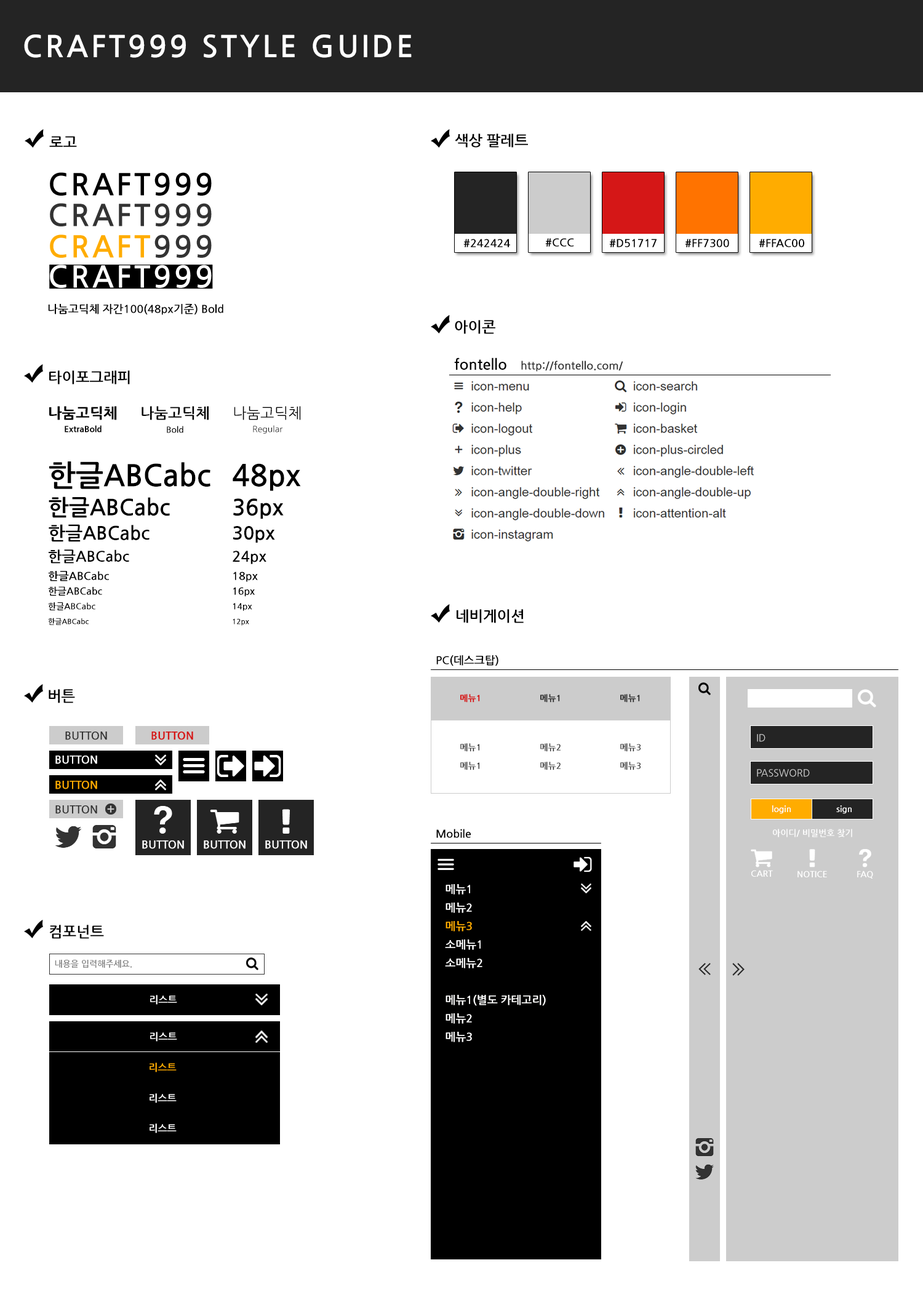
<style>
.page{position:relative;width:923px;height:1292px;background:#ffffff}
.page>*{position:absolute;margin:0}
.t1{font:29.5px "NanumGothicBold";letter-spacing:0.1em;color:#ffffff}
.t2{font:14.8px "NanumGothicBold";color:#000000}
.t3{font:11.1px "NanumGothicBold";color:#000000}
.t4{font:11.1px "NanumGothicBold";color:#333333}
.t5{font:14.8px "NanumGothicExtraBold";color:#000000}
.t6{font:14.8px "NanumGothic";color:#000000}
.t7{font:8.6px "NanumGothicExtraBold";color:#000000}
.t8{font:8.6px "NanumGothicBold";color:#000000}
.t9{font:8.6px "NanumGothic";color:#000000}
.t10{font:29.5px/29.5px "NanumGothicBold";color:#000000}
.t11{font:22.1px/29.5px "NanumGothicBold";color:#000000}
.t12{font:18.5px/24.6px "NanumGothicBold";color:#000000}
.t13{font:14.8px/22.1px "NanumGothicBold";color:#000000}
.t14{font:11.1px/18.5px "NanumGothicBold";color:#000000}
.t15{font:9.8px/14.8px "NanumGothicBold";color:#000000}
.t16{font:8.6px/14.8px "NanumGothicBold";color:#000000}
.t17{font:7.4px/14.8px "NanumGothicBold";color:#000000}
.t18{font:8.6px "NanumGothicExtraBold";color:#d51717}
.t19{font:8.6px "NanumGothicExtraBold";color:#333333}
.t20{font:11.1px "NanumGothicExtraBold";color:#d51717}
.t21{font:9.8px "NanumGothic";color:#cccccc}
.t22{font:8.6px "NanumGothicBold";color:#333333}
.t23{font:11.1px "NanumGothicBold";color:#fefefe}
.t24{font:11.1px "NanumGothicBold";color:#ffac00}
.t25{font:8.6px "NanumGothicBold";color:#fefefe}
.t26{font:11.1px "NanumGothicBold";color:#ffffff}
.t27{font:8.6px "NanumGothicBold";color:#ffffff}
.t28{font:8.6px "NanumGothicBold";color:#828282}
.t29{font:9.8px "NanumGothicBold";color:#ffffff}
.t30{font:11.1px "NanumGothicBold";color:#fffffe}
.t31{font:9.8px "NanumGothicBold";color:#ffac00}
</style>
<div class="page">
<p class="t1" style="left:24px;top:34px;width:388px;height:24px">CRAFT999 STYLE GUIDE</p>
<p class="t2" style="left:49px;top:136px;width:28px;height:11px">로고</p>
<p class="t2" style="left:455px;top:134px;width:73px;height:14px">색상 팔레트</p>
<p class="t3" style="left:463px;top:239px;width:47px;height:8px">#242424</p>
<p class="t3" style="left:545px;top:238px;width:29px;height:9px">#CCC</p>
<p class="t3" style="left:609px;top:239px;width:47px;height:8px">#D51717</p>
<p class="t3" style="left:685px;top:239px;width:44px;height:8px">#FF7300</p>
<p class="t3" style="left:759px;top:239px;width:45px;height:8px">#FFAC00</p>
<p class="t3" style="left:48px;top:304px;width:175px;height:11px">나눔고딕체 자간100(48px기준) Bold</p>
<p class="t2" style="left:455px;top:320px;width:40px;height:14px">아이콘</p>
<p class="t4" style="left:454px;top:357px;width:169px;height:15px"><span class="t2">fontello </span>http://fontello.com/</p>
<p class="t2" style="left:49px;top:370px;width:81px;height:15px">타이포그래피</p>
<p class="t5" style="left:49px;top:406px;width:68px;height:14px">나눔고딕체</p>
<p class="t2" style="left:142px;top:406px;width:67px;height:14px">나눔고딕체</p>
<p class="t6" style="left:234px;top:406px;width:67px;height:14px">나눔고딕체</p>
<p class="t7" style="left:65px;top:425px;width:37px;height:8px">ExtraBold</p>
<p class="t8" style="left:167px;top:426px;width:16px;height:7px">Bold</p>
<p class="t9" style="left:253px;top:425px;width:30px;height:9px">Regular</p>
<p class="t10" style="left:48px;top:461px;width:162px;height:164px;text-align:justify">한글ABCabc<br><span class="t11">한글ABCabc<br></span><span class="t12">한글ABCabc<br></span><span class="t13">한글ABCabc<br></span><span class="t14">한글ABCabc<br></span><span class="t15">한글ABCabc<br></span><span class="t16">한글ABCabc<br></span><span class="t17">한글ABCabc</span></p>
<p class="t10" style="left:233px;top:463px;width:68px;height:163px;text-align:justify">48px<br><span class="t11">36px<br></span><span class="t12">30px<br></span><span class="t13">24px<br></span><span class="t14">18px<br></span><span class="t15">16px<br></span><span class="t16">14px<br></span><span class="t17">12px</span></p>
<p class="t2" style="left:457px;top:609px;width:67px;height:14px">네비게이션</p>
<p class="t3" style="left:436px;top:655px;width:62px;height:11px">PC(데스크탑)</p>
<p class="t2" style="left:49px;top:689px;width:26px;height:14px">버튼</p>
<p class="t18" style="left:460px;top:694px;width:20px;height:9px">메뉴1</p>
<p class="t19" style="left:540px;top:694px;width:20px;height:9px">메뉴1</p>
<p class="t19" style="left:620px;top:694px;width:20px;height:9px">메뉴1</p>
<p class="t4" style="left:65px;top:732px;width:42px;height:8px">BUTTON</p>
<p class="t20" style="left:151px;top:732px;width:42px;height:8px">BUTTON</p>
<p class="t21" style="left:757px;top:734px;width:8px;height:8px">ID</p>
<p class="t22" style="left:460px;top:743px;width:19px;height:9px">메뉴1</p>
<p class="t22" style="left:540px;top:743px;width:21px;height:9px">메뉴2</p>
<p class="t22" style="left:620px;top:743px;width:20px;height:9px">메뉴3</p>
<p class="t23" style="left:55px;top:756px;width:42px;height:8px">BUTTON</p>
<p class="t22" style="left:460px;top:762px;width:19px;height:8px">메뉴1</p>
<p class="t22" style="left:540px;top:762px;width:21px;height:8px">메뉴2</p>
<p class="t22" style="left:620px;top:762px;width:20px;height:8px">메뉴3</p>
<p class="t21" style="left:757px;top:769px;width:53px;height:8px">PASSWORD</p>
<p class="t24" style="left:55px;top:781px;width:42px;height:8px">BUTTON</p>
<p class="t4" style="left:55px;top:805px;width:42px;height:9px">BUTTON</p>
<p class="t25" style="left:772px;top:805px;width:19px;height:9px">login</p>
<p class="t25" style="left:836px;top:805px;width:16px;height:9px">sign</p>
<p class="t3" style="left:436px;top:829px;width:35px;height:9px">Mobile</p>
<p class="t25" style="left:773px;top:829px;width:79px;height:8px">아이디/ 비밀번호 찾기</p>
<p class="t26" style="left:142px;top:840px;width:42px;height:9px">BUTTON</p>
<p class="t26" style="left:204px;top:840px;width:41px;height:9px">BUTTON</p>
<p class="t26" style="left:265px;top:840px;width:42px;height:9px">BUTTON</p>
<p class="t27" style="left:751px;top:870px;width:22px;height:7px">CART</p>
<p class="t27" style="left:797px;top:871px;width:30px;height:6px">NOTICE</p>
<p class="t27" style="left:857px;top:871px;width:16px;height:8px">FAQ</p>
<p class="t26" style="left:445px;top:884px;width:25px;height:11px">메뉴1</p>
<p class="t26" style="left:445px;top:903px;width:27px;height:10px">메뉴2</p>
<p class="t2" style="left:49px;top:925px;width:55px;height:14px">컴포넌트</p>
<p class="t24" style="left:445px;top:921px;width:27px;height:11px">메뉴3</p>
<p class="t26" style="left:445px;top:940px;width:36px;height:10px">소메뉴1</p>
<p class="t28" style="left:55px;top:960px;width:77px;height:8px">내용을 입력해주세요.</p>
<p class="t26" style="left:445px;top:958px;width:37px;height:10px">소메뉴2</p>
<p class="t29" style="left:150px;top:995px;width:27px;height:10px">리스트</p>
<p class="t30" style="left:445px;top:995px;width:101px;height:11px">메뉴1(별도 카테고리)</p>
<p class="t26" style="left:445px;top:1013px;width:27px;height:11px">메뉴2</p>
<p class="t29" style="left:150px;top:1032px;width:27px;height:10px">리스트</p>
<p class="t26" style="left:445px;top:1032px;width:27px;height:10px">메뉴3</p>
<p class="t31" style="left:150px;top:1063px;width:27px;height:9px">리스트</p>
<p class="t29" style="left:150px;top:1093px;width:27px;height:10px">리스트</p>
<p class="t29" style="left:150px;top:1123px;width:27px;height:10px">리스트</p>
</div>
